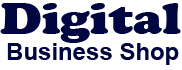
<style>
.page{position:relative;width:182px;height:70px;background:#ffffff}
.page>*{position:absolute;margin:0}
.t1{font:45.8px "CooperBlack";color:#000640;scale:1.14 1}
.t2{font:24px "Arial-BoldMT";color:#000640}
</style>
<div class="page">
<p class="t1" style="left:0px;top:3px;width:181px;height:40px">Digital</p>
<p class="t2" style="left:7px;top:43px;width:172px;height:22px">Business Shop</p>
</div>
